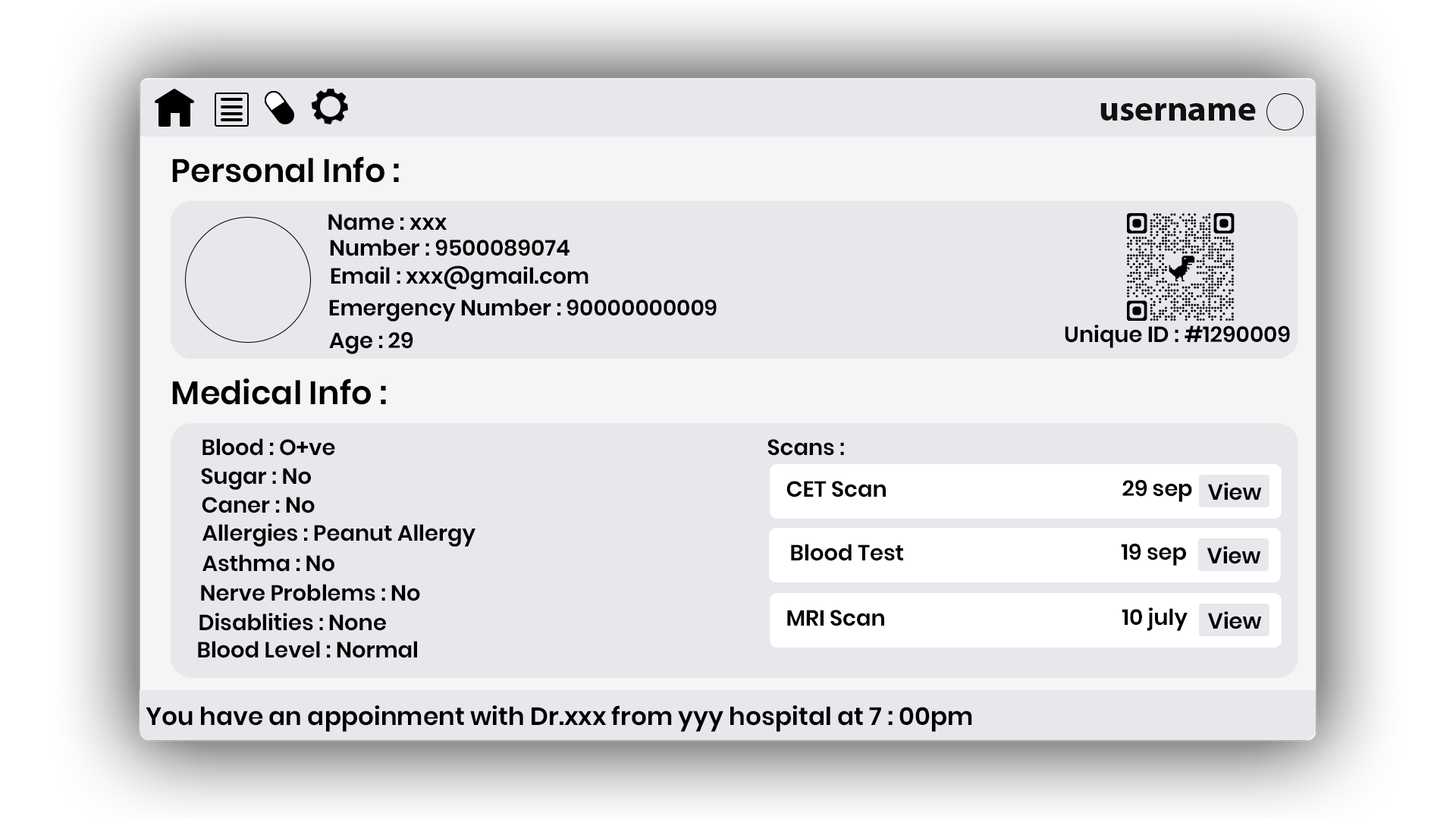
<style>
.page{position:relative;width:1456px;height:819px;background:#e7e8ec}
.page>*{position:absolute;margin:0}
.t1{font:35.6px "MyriadPro-Bold";color:#12110f}
.t2{font:32.6px "Poppins-SemiBold";color:#000000}
.t3{font:21.9px "Poppins-SemiBold";color:#000000}
.t4{font:24.9px "Poppins-SemiBold";color:#000000}
</style>
<div class="page">
<p class="t1" style="left:1100px;top:103px;width:156px;height:18px">username</p>
<p class="t2" style="left:172px;top:156px;width:227px;height:27px">Personal Info :</p>
<p class="t3" style="left:328px;top:214px;width:119px;height:17px">Name : xxx</p>
<p class="t3" style="left:330px;top:239px;width:240px;height:17px">Number : 9500089074</p>
<p class="t3" style="left:331px;top:265px;width:257px;height:25px">Email : xxx@gmail.com</p>
<p class="t3" style="left:329px;top:299px;width:388px;height:23px">Emergency Number : 90000000009</p>
<p class="t3" style="left:1065px;top:325px;width:225px;height:23px">Unique ID : #1290009</p>
<p class="t3" style="left:329px;top:331px;width:84px;height:23px">Age : 29</p>
<p class="t2" style="left:172px;top:378px;width:214px;height:27px">Medical Info :</p>
<p class="t3" style="left:202px;top:438px;width:133px;height:18px">Blood : O+ve</p>
<p class="t3" style="left:767px;top:439px;width:77px;height:17px">Scans :</p>
<p class="t3" style="left:201px;top:468px;width:110px;height:22px">Sugar : No</p>
<p class="t3" style="left:786px;top:481px;width:100px;height:16px">CET Scan</p>
<p class="t3" style="left:1122px;top:479px;width:70px;height:23px">29 sep</p>
<p class="t3" style="left:1207px;top:482px;width:55px;height:18px">View</p>
<p class="t3" style="left:202px;top:497px;width:113px;height:16px">Caner : No</p>
<p class="t3" style="left:202px;top:523px;width:273px;height:24px">Allergies : Peanut Allergy</p>
<p class="t3" style="left:791px;top:544px;width:112px;height:17px">Blood Test</p>
<p class="t3" style="left:1121px;top:543px;width:65px;height:23px">19 sep</p>
<p class="t3" style="left:1206px;top:546px;width:55px;height:18px">View</p>
<p class="t3" style="left:202px;top:554px;width:132px;height:18px">Asthma : No</p>
<p class="t3" style="left:201px;top:584px;width:219px;height:17px">Nerve Problems : No</p>
<p class="t3" style="left:199px;top:613px;width:187px;height:18px">Disablities : None</p>
<p class="t3" style="left:787px;top:610px;width:97px;height:16px">MRI Scan</p>
<p class="t3" style="left:1122px;top:607px;width:66px;height:24px">10 july</p>
<p class="t3" style="left:1207px;top:611px;width:55px;height:18px">View</p>
<p class="t3" style="left:198px;top:641px;width:219px;height:17px">Blood Level : Normal</p>
<p class="t4" style="left:146px;top:705px;width:826px;height:27px">You have an appoinment with Dr.xxx from yyy hospital at 7 : 00pm</p>
</div>
